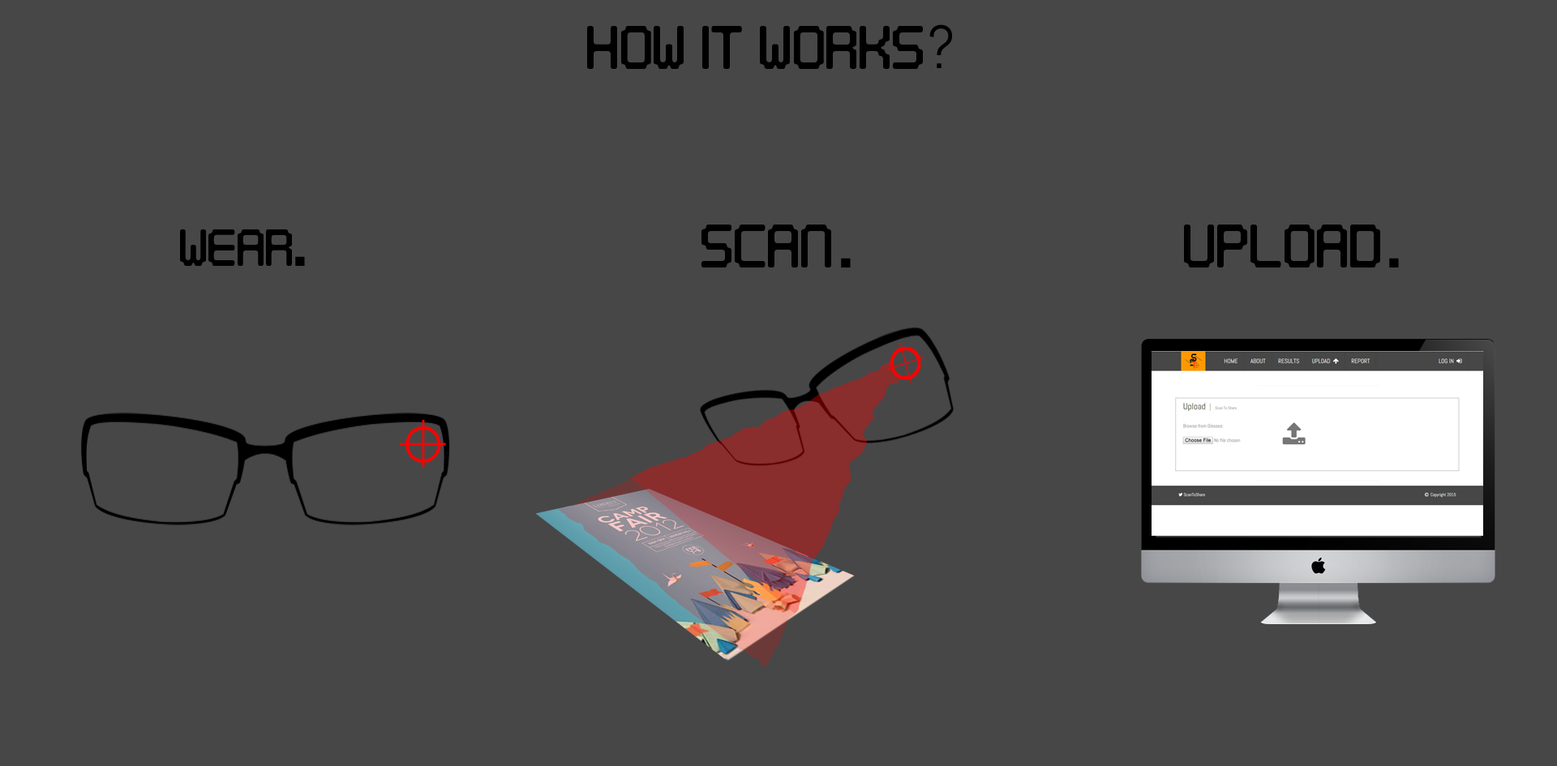
<style>
.page{position:relative;width:1557px;height:766px;background:#474747}
.page>*{position:absolute;margin:0}
.t1{font:60.8px "Digitaltech";color:#000000}
.t2{font:60.8px "Abel-Regular";color:#000000}
.t3{font:52.5px "Digitaltech";color:#000000}
.t4{font:119.3px "Abel-Regular";color:#000000}
</style>
<div class="page">
<p class="t1" style="left:587px;top:26px;width:336px;height:43px">How it Works</p>
<p class="t2" style="left:929px;top:24px;width:23px;height:44px">?</p>
<p class="t3" style="left:180px;top:229px;width:112px;height:37px">WEAR</p>
<p class="t1" style="left:701px;top:225px;width:130px;height:43px">Scan</p>
<p class="t1" style="left:1184px;top:225px;width:196px;height:43px">UpLoad</p>
<p class="t4" style="left:295px;top:256px;width:10px;height:10px">.</p>
<p class="t4" style="left:841px;top:258px;width:9px;height:10px">.</p>
<p class="t4" style="left:1389px;top:258px;width:9px;height:10px">.</p>
</div>
